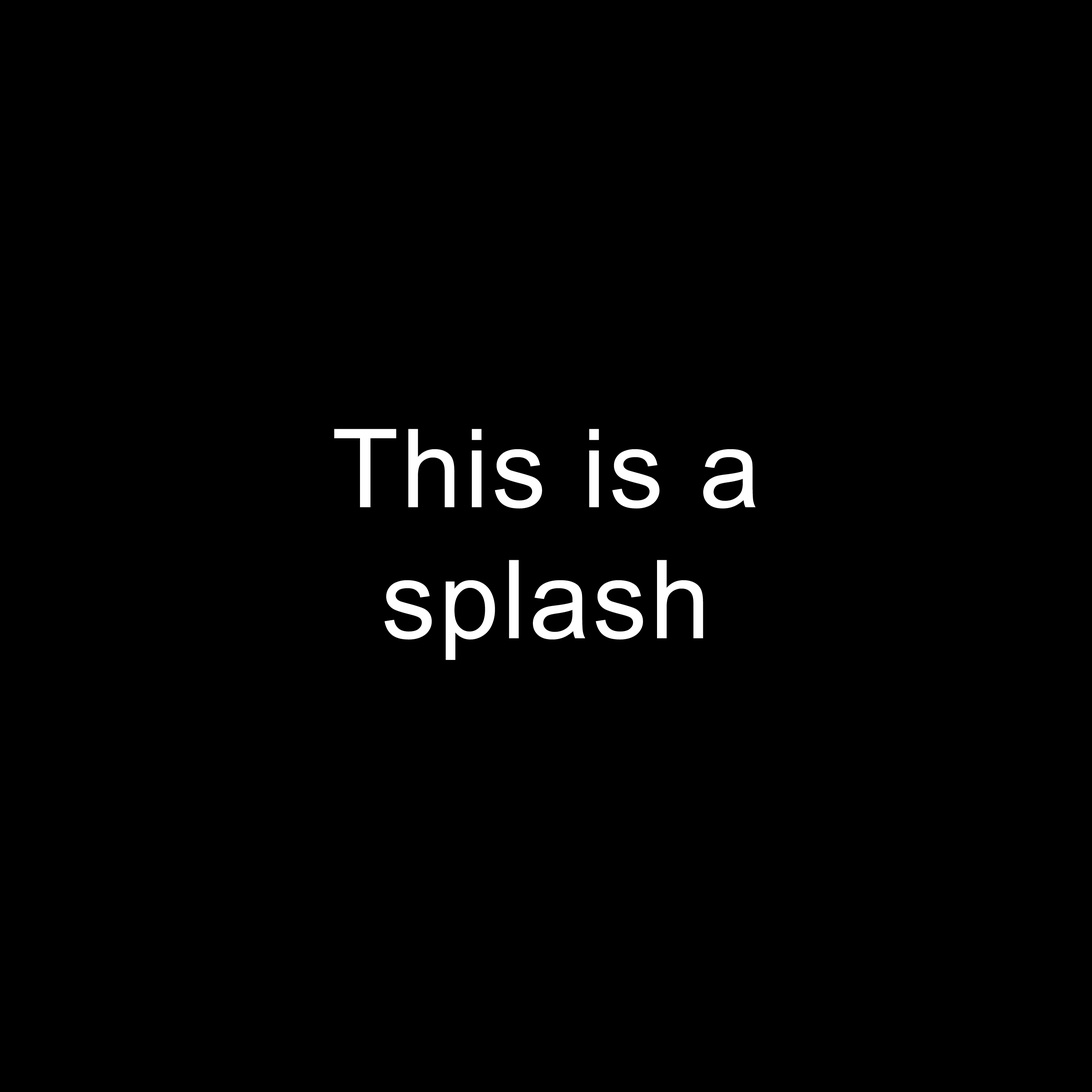
<style>
.page{position:relative;width:1092px;height:1092px;background:#000000}
.page>*{position:absolute;margin:0}
.t1{font:109.2px "ArialMT";letter-spacing:0.025em;color:#ffffff}
</style>
<div class="page">
<p class="t1" style="left:334px;top:429px;width:422px;height:231px;text-align:center">This is a splash</p>
</div>
